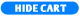
<style>
.page{position:relative;width:80px;height:16px;background:#0080ff}
.page>*{position:absolute;margin:0}
.t1{font:10px "ArmWrestler-Bold";color:#ffffff}
</style>
<div class="page">
<p class="t1" style="left:15px;top:4px;width:52px;height:8px">HIDE CART</p>
</div>
